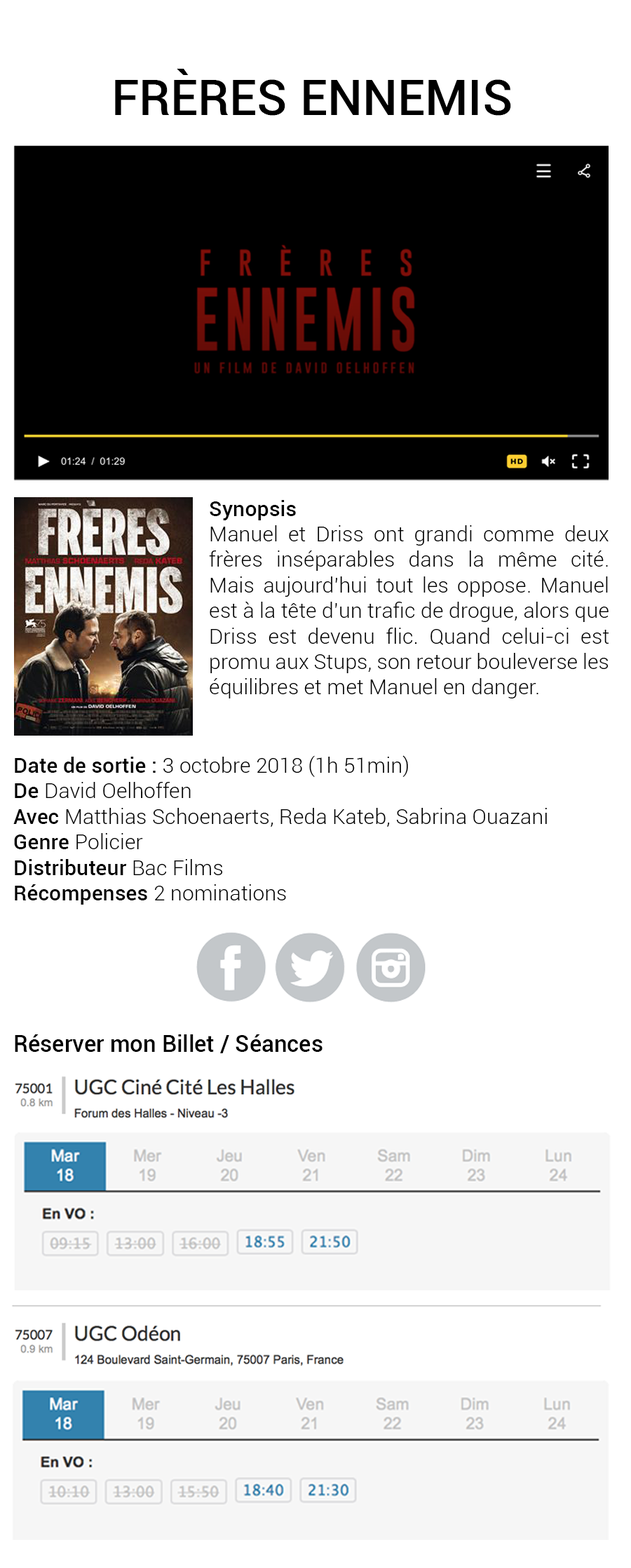
<style>
.page{position:relative;width:631px;height:1568px;background:#ffffff}
.page>*{position:absolute;margin:0}
.t1{font:49.6px "Roboto-Medium";color:#000000}
.t2{font:49.6px "Roboto-Medium";color:#000000;text-transform:uppercase}
.t3{font:21.3px "Roboto-Light";color:#000000}
.t4{font:21.3px "Roboto-Medium";color:#000000}
.t5{font:23px "Roboto-Medium";color:#000000}
</style>
<div class="page">
<p class="t1" style="left:115px;top:69px;width:396px;height:47px">FR<span class="t2">è</span>RES ENNEMIS</p>
<p class="t3" style="left:209px;top:500px;width:400px;height:198px;text-align:justify"><span class="t4">Synopsis<br></span>Manuel et Driss ont grandi comme deux frères inséparables dans la même cité. Mais aujourd’hui tout les oppose. Manuel est à la tête d’un trafic de drogue, alors que Driss est devenu flic. Quand celui-ci est promu aux Stups, son retour bouleverse les équilibres et met Manuel en danger.</p>
<p class="t3" style="left:13px;top:755px;width:534px;height:150px;text-align:justify"><span class="t4">Date de sortie : </span>3 octobre 2018 (1h 51min)<br><span class="t4">De </span>David Oelhoffen<br><span class="t4">Avec </span>Matthias Schoenaerts, Reda Kateb, Sabrina Ouazani<span class="t4"><br>Genre </span>Policier<br><span class="t4">Distributeur </span>Bac Films<br><span class="t4">Récompenses </span>2 nominations</p>
<p class="t5" style="left:15px;top:1034px;width:308px;height:19px">Réserver mon Billet / Séances</p>
</div>
